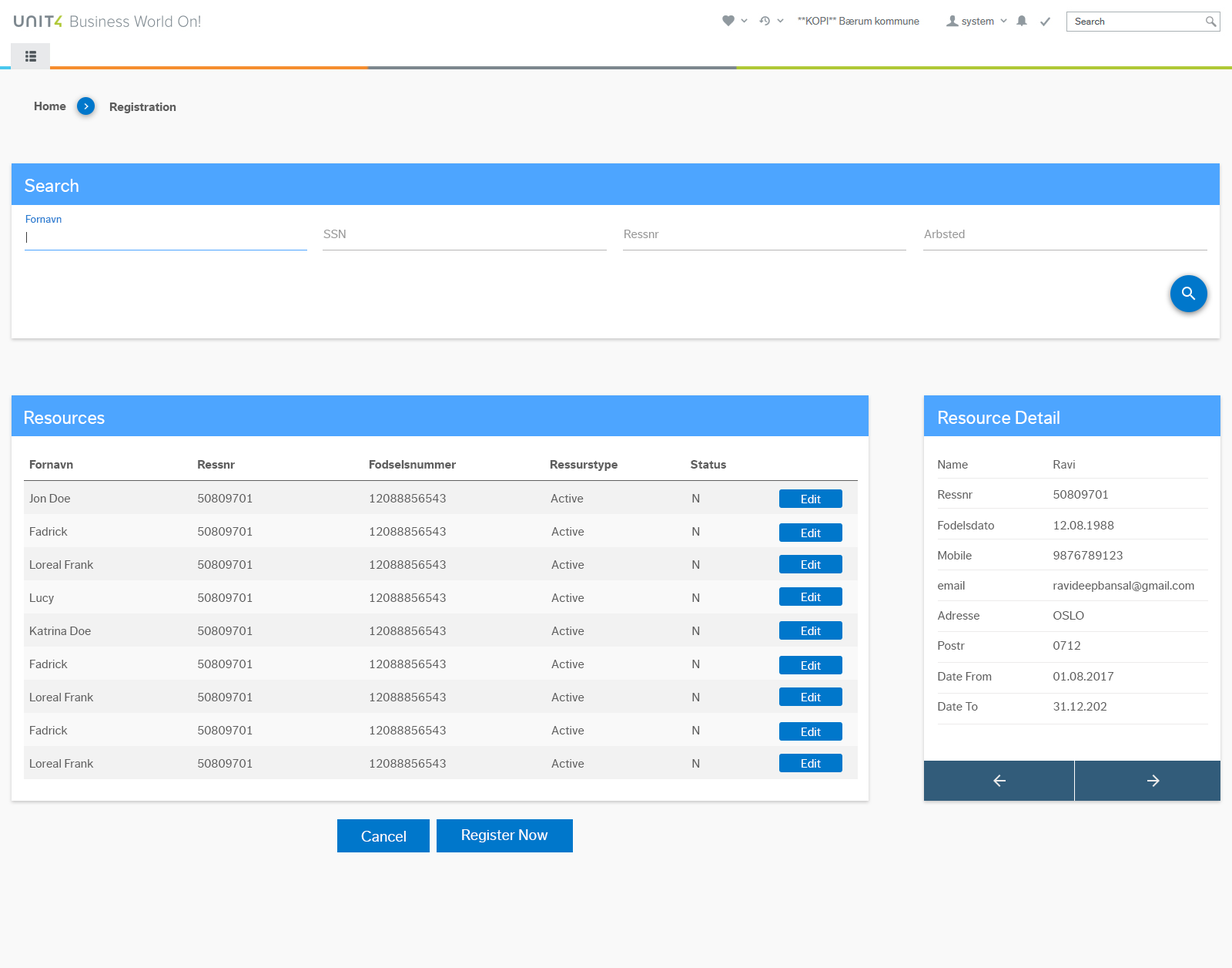
<style>
.page{position:relative;width:1232px;height:968px;background:#f9f9f9}
.page>*{position:absolute;margin:0}
.t1{font:12.3px "DagnyCompPro-Bold";color:#5e5e5e}
.t2{font:18.5px "DagnyCompPro";color:#ffffff}
.t3{font:10.8px "DagnyCompPro";color:#287cd1}
.t4{font:12.3px "DagnyCompPro";color:#989898}
.t5{font:12.3px "DagnyCompPro";color:#5e5e5e}
.t6{font:12.3px "DagnyCompPro";color:#ffffff}
.t7{font:15.4px "DagnyCompPro";color:#ffffff}
</style>
<div class="page">
<p class="t1" style="left:34px;top:102px;width:32px;height:8px">Home</p>
<p class="t1" style="left:109px;top:102px;width:67px;height:11px">Registration</p>
<p class="t2" style="left:25px;top:179px;width:54px;height:13px">Search</p>
<p class="t3" style="left:25px;top:215px;width:37px;height:8px">Fornavn</p>
<p class="t4" style="left:324px;top:230px;width:22px;height:8px">SSN</p>
<p class="t4" style="left:625px;top:230px;width:34px;height:8px">Ressnr</p>
<p class="t4" style="left:924px;top:230px;width:41px;height:8px">Arbsted</p>
<p class="t2" style="left:25px;top:411px;width:80px;height:13px">Resources</p>
<p class="t2" style="left:939px;top:411px;width:121px;height:13px">Resource Detail</p>
<p class="t1" style="left:29px;top:460px;width:44px;height:8px">Fornavn</p>
<p class="t1" style="left:198px;top:460px;width:37px;height:8px">Ressnr</p>
<p class="t1" style="left:369px;top:460px;width:88px;height:8px">Fodselsnummer</p>
<p class="t1" style="left:550px;top:460px;width:68px;height:11px">Ressurstype</p>
<p class="t1" style="left:690px;top:460px;width:36px;height:8px">Status</p>
<p class="t5" style="left:937px;top:460px;width:57px;height:250px">Name<br>Ressnr<br>Fodelsdato<br>Mobile<br>email<br>Adresse<br>Postr<br>Date From<br>Date To</p>
<p class="t5" style="left:1054px;top:460px;width:141px;height:250px">Ravi<br>50809701<br>12.08.1988<br>9876789123<br>ravideepbansal@gmail.com<br>OSLO<br>0712<br>01.08.2017<br>31.12.202</p>
<p class="t5" style="left:29px;top:494px;width:41px;height:8px">Jon Doe</p>
<p class="t5" style="left:198px;top:494px;width:55px;height:8px">50809701</p>
<p class="t5" style="left:370px;top:494px;width:76px;height:8px">12088856543</p>
<p class="t5" style="left:551px;top:494px;width:33px;height:8px">Active</p>
<p class="t5" style="left:693px;top:494px;width:7px;height:8px">N</p>
<p class="t6" style="left:802px;top:495px;width:19px;height:8px">Edit</p>
<p class="t5" style="left:30px;top:527px;width:38px;height:8px">Fadrick</p>
<p class="t5" style="left:198px;top:527px;width:55px;height:8px">50809701</p>
<p class="t5" style="left:370px;top:527px;width:76px;height:8px">12088856543</p>
<p class="t5" style="left:552px;top:527px;width:33px;height:8px">Active</p>
<p class="t5" style="left:693px;top:527px;width:7px;height:8px">N</p>
<p class="t6" style="left:802px;top:528px;width:19px;height:9px">Edit</p>
<p class="t5" style="left:30px;top:560px;width:64px;height:8px">Loreal Frank</p>
<p class="t5" style="left:198px;top:560px;width:55px;height:8px">50809701</p>
<p class="t5" style="left:370px;top:560px;width:76px;height:8px">12088856543</p>
<p class="t5" style="left:552px;top:560px;width:33px;height:8px">Active</p>
<p class="t5" style="left:693px;top:560px;width:7px;height:8px">N</p>
<p class="t6" style="left:802px;top:560px;width:19px;height:8px">Edit</p>
<p class="t5" style="left:30px;top:593px;width:24px;height:11px">Lucy</p>
<p class="t5" style="left:198px;top:593px;width:55px;height:9px">50809701</p>
<p class="t5" style="left:370px;top:593px;width:76px;height:9px">12088856543</p>
<p class="t5" style="left:552px;top:593px;width:33px;height:9px">Active</p>
<p class="t5" style="left:693px;top:593px;width:7px;height:9px">N</p>
<p class="t6" style="left:802px;top:592px;width:19px;height:9px">Edit</p>
<p class="t5" style="left:30px;top:626px;width:61px;height:9px">Katrina Doe</p>
<p class="t5" style="left:198px;top:626px;width:55px;height:9px">50809701</p>
<p class="t5" style="left:370px;top:626px;width:76px;height:9px">12088856543</p>
<p class="t5" style="left:552px;top:626px;width:33px;height:9px">Active</p>
<p class="t5" style="left:693px;top:626px;width:7px;height:9px">N</p>
<p class="t6" style="left:802px;top:626px;width:19px;height:9px">Edit</p>
<p class="t5" style="left:30px;top:659px;width:38px;height:9px">Fadrick</p>
<p class="t5" style="left:198px;top:659px;width:55px;height:9px">50809701</p>
<p class="t5" style="left:370px;top:659px;width:76px;height:9px">12088856543</p>
<p class="t5" style="left:552px;top:659px;width:33px;height:9px">Active</p>
<p class="t5" style="left:693px;top:659px;width:7px;height:9px">N</p>
<p class="t6" style="left:802px;top:661px;width:19px;height:8px">Edit</p>
<p class="t5" style="left:30px;top:693px;width:64px;height:8px">Loreal Frank</p>
<p class="t5" style="left:198px;top:693px;width:55px;height:8px">50809701</p>
<p class="t5" style="left:370px;top:693px;width:76px;height:8px">12088856543</p>
<p class="t5" style="left:552px;top:693px;width:33px;height:8px">Active</p>
<p class="t5" style="left:693px;top:693px;width:7px;height:8px">N</p>
<p class="t6" style="left:802px;top:693px;width:19px;height:8px">Edit</p>
<p class="t5" style="left:30px;top:726px;width:38px;height:8px">Fadrick</p>
<p class="t5" style="left:198px;top:726px;width:55px;height:8px">50809701</p>
<p class="t5" style="left:370px;top:726px;width:76px;height:8px">12088856543</p>
<p class="t5" style="left:552px;top:726px;width:33px;height:8px">Active</p>
<p class="t5" style="left:693px;top:726px;width:7px;height:8px">N</p>
<p class="t6" style="left:802px;top:727px;width:19px;height:9px">Edit</p>
<p class="t5" style="left:30px;top:759px;width:64px;height:8px">Loreal Frank</p>
<p class="t5" style="left:198px;top:759px;width:55px;height:8px">50809701</p>
<p class="t5" style="left:370px;top:759px;width:76px;height:8px">12088856543</p>
<p class="t5" style="left:552px;top:759px;width:33px;height:8px">Active</p>
<p class="t5" style="left:693px;top:759px;width:7px;height:8px">N</p>
<p class="t6" style="left:802px;top:759px;width:19px;height:8px">Edit</p>
<p class="t7" style="left:361px;top:830px;width:45px;height:11px">Cancel</p>
<p class="t7" style="left:462px;top:829px;width:86px;height:13px">Register Now</p>
</div>
